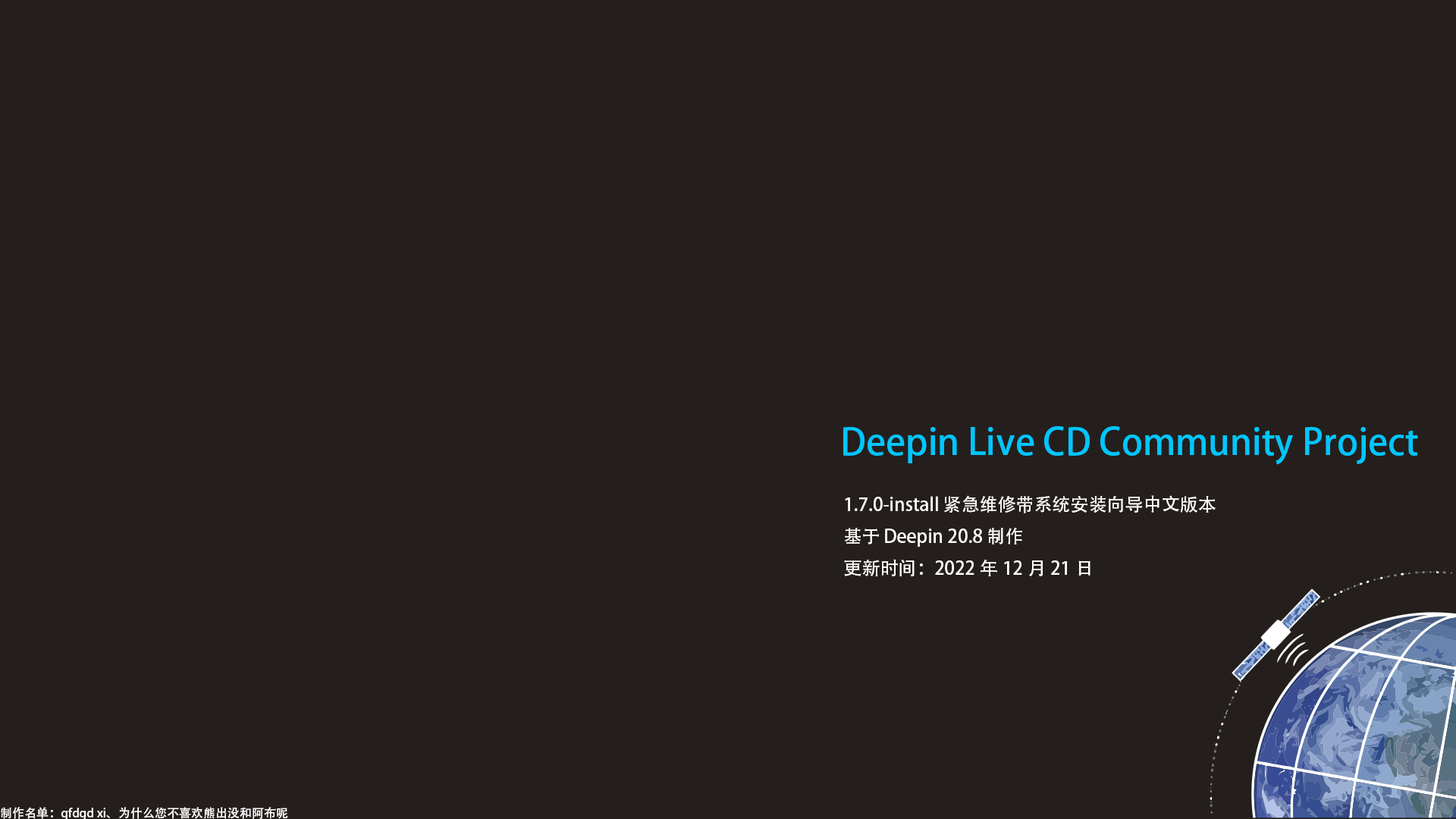
<style>
.page{position:relative;width:1456px;height:819px;background:#241f1c}
.page>*{position:absolute;margin:0}
.t1{font:36.4px "AdobeHeitiStd-Regular";color:#00c6ff}
.t2{font:18.2px "AdobeHeitiStd-Regular";color:#ffffff}
.t3{font:12.1px "AdobeHeitiStd-Regular";color:#ffffff}
</style>
<div class="page">
<p class="t1" style="left:843px;top:426px;width:575px;height:39px">Deepin Live CD Community Project</p>
<p class="t2" style="left:844px;top:495px;width:372px;height:82px">1.7.0-install 紧急维修带系统安装向导中文版本<br>基于 Deepin 20.8 制作<br>更新时间：2022年12月21日</p>
<p class="t3" style="left:1px;top:807px;width:287px;height:14px">制作名单：gfdgd xi、为什么您不喜欢熊出没和阿布呢</p>
</div>
